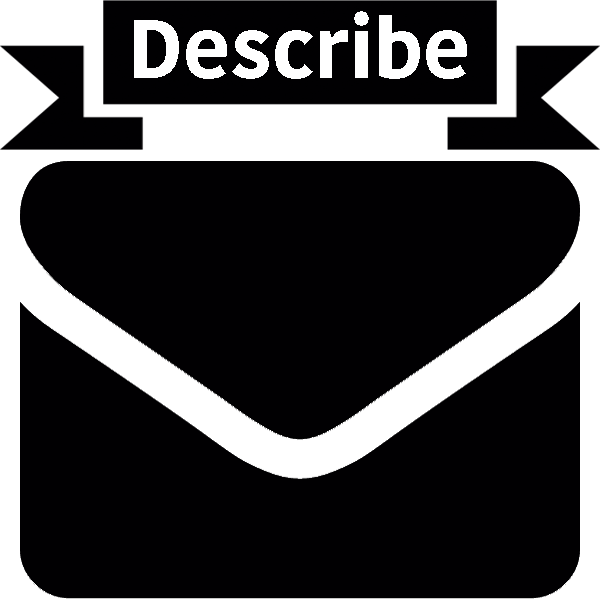
<style>
.page{position:relative;width:600px;height:600px;background:#010002}
.page>*{position:absolute;margin:0}
.t1{font:83.3px "KohinoorDevanagari-Bold";color:#ffffff}
</style>
<div class="page">
<p class="t1" style="left:134px;top:11px;width:333px;height:68px">Describe</p>
</div>
